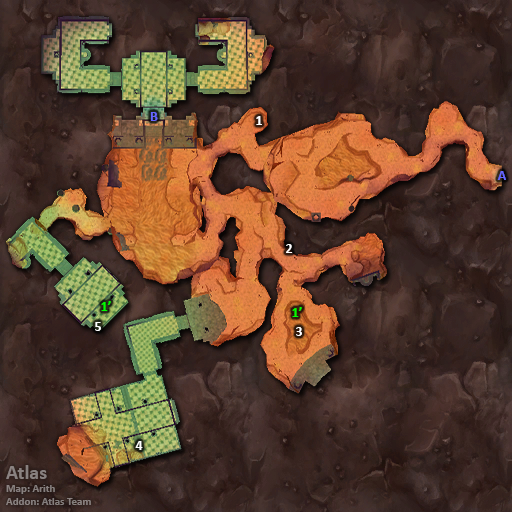
<style>
.page{position:relative;width:512px;height:512px}
.page>*{position:absolute;margin:0}
.t1{font:14px "Calibri-Bold";color:#6666ff}
.t2{font:14px "Calibri-Bold";color:#ffffff}
.t3{font:14px "Calibri-Bold";color:#00ff00}
.t4{font:11px "Calibri-Bold";color:#88817f}
.t5{font:20px "Calibri-Bold";color:#88817f}
</style>
<div class="page">
<p class="t1" style="left:150px;top:112px;width:8px;height:9px">B</p>
<p class="t2" style="left:256px;top:116px;width:6px;height:9px">1</p>
<p class="t1" style="left:497px;top:171px;width:9px;height:9px">A</p>
<p class="t2" style="left:286px;top:244px;width:7px;height:9px">2</p>
<p class="t3" style="left:101px;top:301px;width:10px;height:10px">1’</p>
<p class="t3" style="left:292px;top:307px;width:10px;height:10px">1’</p>
<p class="t2" style="left:95px;top:322px;width:6px;height:9px">5</p>
<p class="t2" style="left:296px;top:327px;width:6px;height:9px">3</p>
<p class="t2" style="left:135px;top:441px;width:8px;height:9px">4</p>
<p class="t4" style="left:6px;top:465px;width:85px;height:40px"><span class="t5">Atlas<br></span>Map: Arith<br>Addon: Atlas Team</p>
</div>
